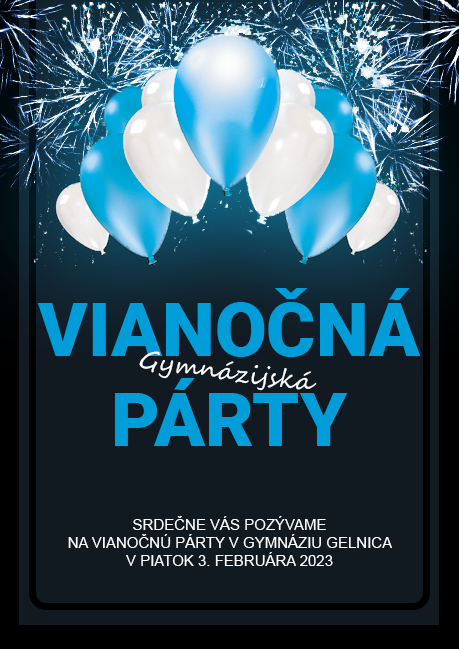
<style>
.page{position:relative;width:459px;height:649px;background:#111921}
.page>*{position:absolute;margin:0}
.t1{font:75px "Roboto-Black";color:#009dd8}
.t2{font:25px "SegoeScript";color:#ffffff}
.t3{font:15px "ArialMT";color:#ffffff}
</style>
<div class="page">
<p class="t1" style="left:37px;top:288px;width:384px;height:158px;text-align:center">VIANOČNÁ<br>PÁRTY</p>
<p class="t2" style="left:139px;top:351px;width:178px;height:40px;rotate:7deg">Gymnázijská</p>
<p class="t3" style="left:68px;top:516px;width:324px;height:50px;text-align:center">SRDEČNE VÁS POZÝVAME<br>NA VIANOČNÚ PÁRTY V GYMNÁZIU GELNICA<br>V PIATOK 3. FEBRUÁRA 2023</p>
</div>
